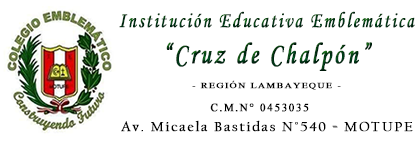
<style>
.page{position:relative;width:420px;height:142px;background:#ffffff}
.page>*{position:absolute;margin:0}
.t1{font:22px "MonotypeCorsiva";letter-spacing:0.1em;color:#003514;font-weight:bold;scale:0.8 1}
.t2{font:30px "MonotypeCorsiva";letter-spacing:0.1em;color:#003514;font-weight:bold;scale:0.8 1}
.t3{font:10.2px "Kokila";letter-spacing:0.1em;color:#000000;font-weight:bold;scale:1.22 1}
.t4{font:14px "Kokila";letter-spacing:0.1em;color:#000000;font-weight:bold}
.t5{font:13.7px "CalifornianFB-Reg";letter-spacing:0.1em;color:#000000;font-weight:bold;scale:1.04 1}
.t6{font:13.7px "Algerian";letter-spacing:0.1em;color:#000000;font-weight:bold;scale:1.04 1}
</style>
<div class="page">
<p class="t1" style="left:119px;top:11px;width:296px;height:60px;text-align:center">Institución Educativa Emblemática<br><span class="t2">“Cruz de Chalpón”</span></p>
<p class="t3" style="left:192px;top:80px;width:149px;height:10px">- REGIÓN LAMBAYEQUE -</p>
<p class="t4" style="left:210px;top:103px;width:99px;height:9px">C.M.N° 0453035</p>
<p class="t5" style="left:121px;top:120px;width:292px;height:12px">Av. Micaela Bastidas N°540 <span class="t6">- </span>MOTUPE</p>
</div>
